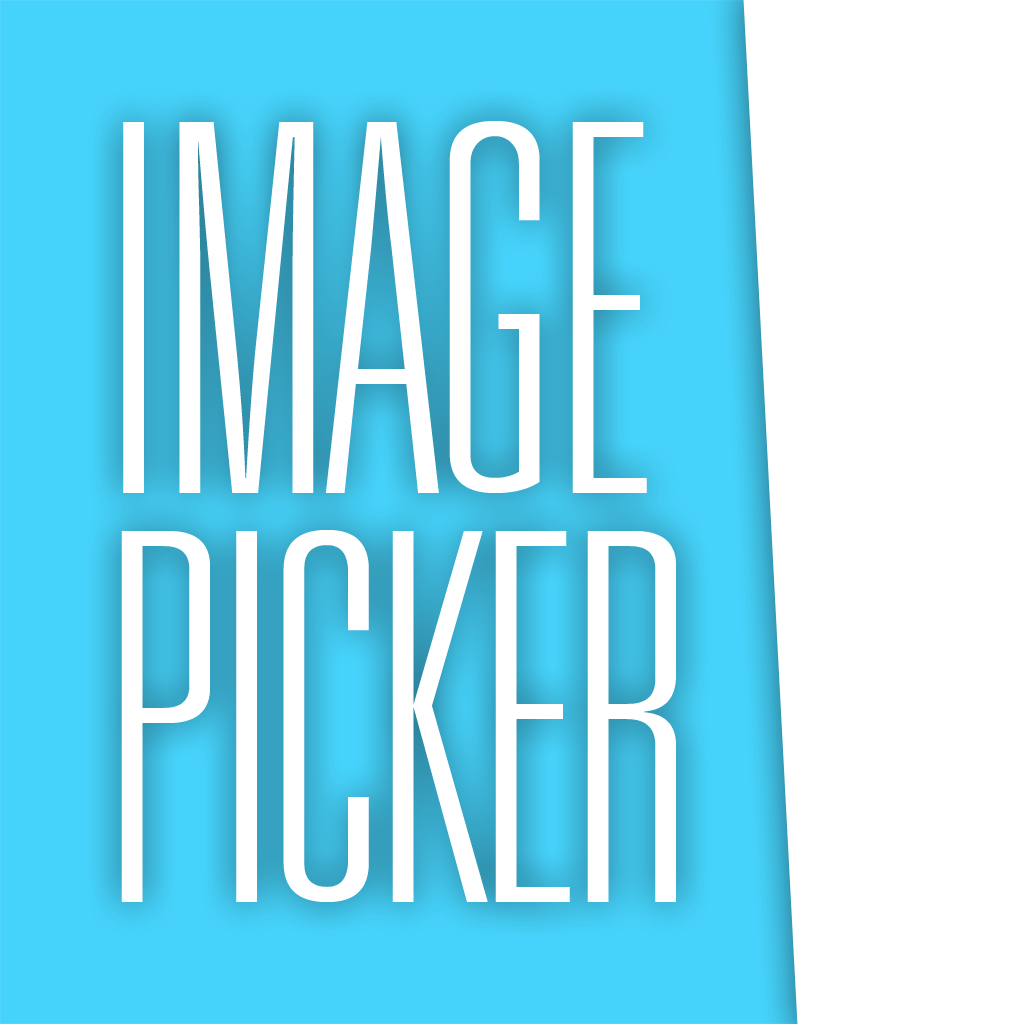
<style>
.page{position:relative;width:1024px;height:1024px;background:#ffffff}
.page>*{position:absolute;margin:0}
.t1{font:512px/409.6px "UniversLT-ThinUltraCondensed";color:#ffffff;text-transform:uppercase}
</style>
<div class="page">
<p class="t1" style="left:121px;top:121px;width:555px;height:781px">Image<br>Picker</p>
</div>
